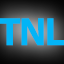
<style>
.page{position:relative;width:64px;height:64px}
.page>*{position:absolute;margin:0}
.t1{font:39.6px "MyriadPro-Bold";letter-spacing:-0.04em;color:#03b4f6}
</style>
<div class="page">
<p class="t1" style="left:0px;top:18px;width:65px;height:28px">TNL</p>
</div>
